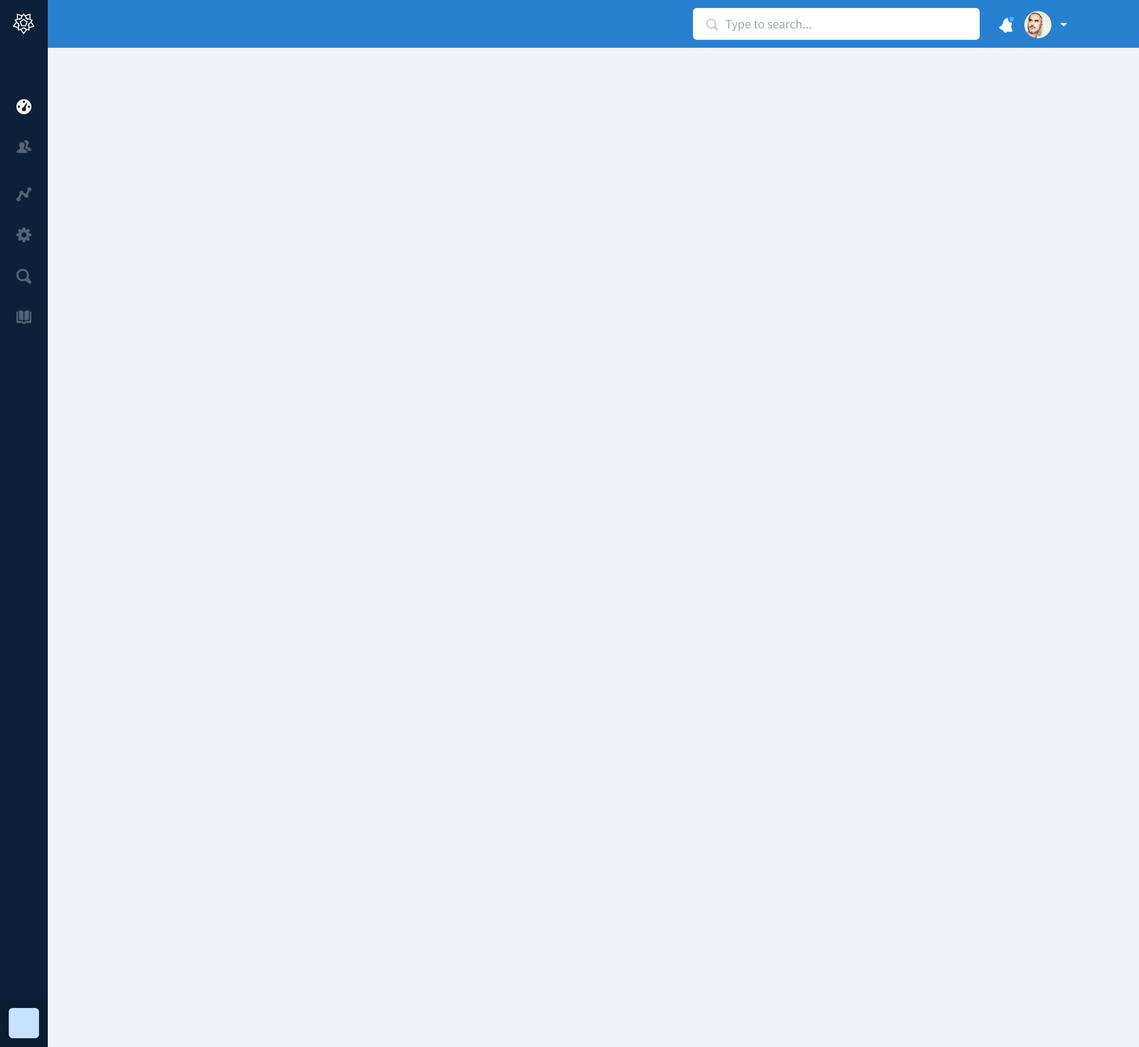
<style>
.page{position:relative;width:1139px;height:1047px;background:#f0f2f7}
.page>*{position:absolute;margin:0}
.t1{font:12.7px "SourceSansPro-Regular";color:#98aaba}
</style>
<div class="page">
<p class="t1" style="left:725px;top:19px;width:86px;height:12px">Type to search...</p>
</div>
